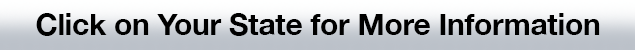
<style>
.page{position:relative;width:635px;height:50px}
.page>*{position:absolute;margin:0}
.t1{font:30px "HelveticaNeue-Bold";letter-spacing:-0.01em;color:#000000}
</style>
<div class="page">
<p class="t1" style="left:36px;top:13px;width:564px;height:23px">Click on Your State for More Information</p>
</div>
